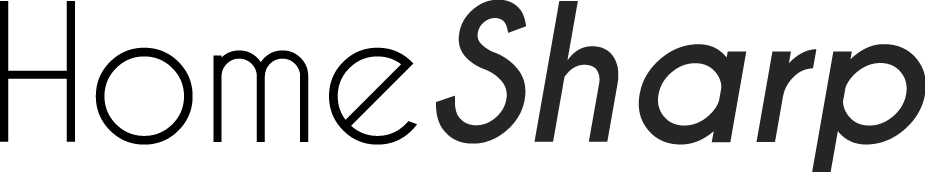
<style>
.page{position:relative;width:925px;height:172px;background:#ffffff}
.page>*{position:absolute;margin:0}
.t1{font:180px "CaviarDreams-BoldItalic";color:#252525}
.t2{font:180px "CaviarDreams";color:#000000}
</style>
<div class="page">
<p class="t1" style="left:0px;top:0px;width:926px;height:173px"><span class="t2">Home</span>Sharp</p>
</div>
